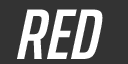
<style>
.page{position:relative;width:128px;height:64px;background:#333333}
.page>*{position:absolute;margin:0}
.t1{font:72px "SairaExtraCondensed-SemiBoldItalic";color:#ffffff}
</style>
<div class="page">
<p class="t1" style="left:17px;top:9px;width:86px;height:50px">RED</p>
</div>
